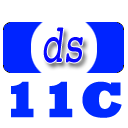
<style>
.page{position:relative;width:128px;height:128px;background:#ffffff}
.page>*{position:absolute;margin:0}
.t1{font:54px "Courier";color:#0000ff;font-style:italic;scale:0.67 1}
.t2{font:50.4px "Rockwell-ExtraBold";color:#002afe;font-weight:bold;scale:1.07 1}
</style>
<div class="page">
<p class="t1" style="left:43px;top:27px;width:40px;height:36px;opacity:0.97">ds</p>
<p class="t2" style="left:11px;top:81px;width:111px;height:37px">11C</p>
</div>
